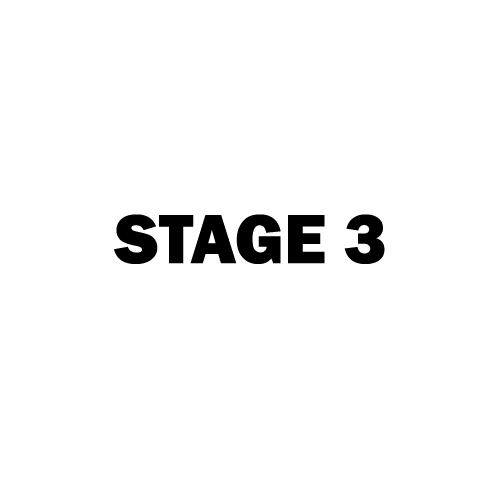
<style>
.page{position:relative;width:500px;height:500px;background:#ffffff}
.page>*{position:absolute;margin:0}
.t1{font:72px "FranklinGothic-Heavy";color:#000000}
</style>
<div class="page">
<p class="t1" style="left:114px;top:214px;width:271px;height:50px">STAGE 3</p>
</div>
